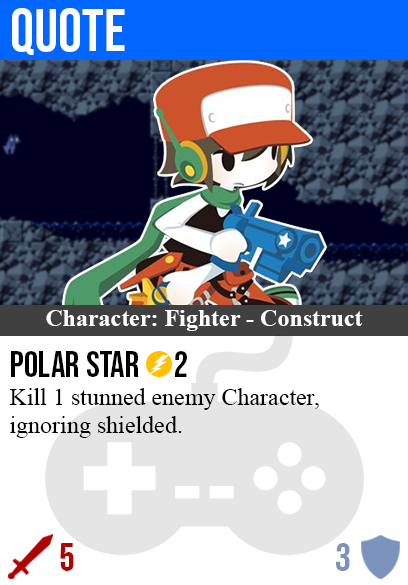
<style>
.page{position:relative;width:408px;height:585px;background:#ffffff}
.page>*{position:absolute;margin:0}
.t1{font:60px "BebasNeue-Regular";color:#ffffff}
.t2{font:24px "TimesNewRomanPS-BoldMT";color:#ffffff}
.t3{font:36px "BebasNeue-Regular";color:#000000}
.t4{font:24px "TimesNewRomanPSMT";color:#000000}
.t5{font:40px "BebasNeue-Regular";color:#af0202}
.t6{font:40px "BebasNeue-Regular";color:#7c94bd}
</style>
<div class="page">
<p class="t1" style="left:12px;top:8px;width:113px;height:47px">quote</p>
<p class="t2" style="left:46px;top:310px;width:317px;height:21px">Character: Fighter - Construct</p>
<p class="t3" style="left:11px;top:351px;width:176px;height:26px">polar star      2</p>
<p class="t4" style="left:9px;top:388px;width:310px;height:50px">Kill 1 stunned enemy Character,<br>ignoring shielded.</p>
<p class="t5" style="left:60px;top:543px;width:14px;height:28px">5</p>
<p class="t6" style="left:336px;top:543px;width:14px;height:28px">3</p>
</div>
